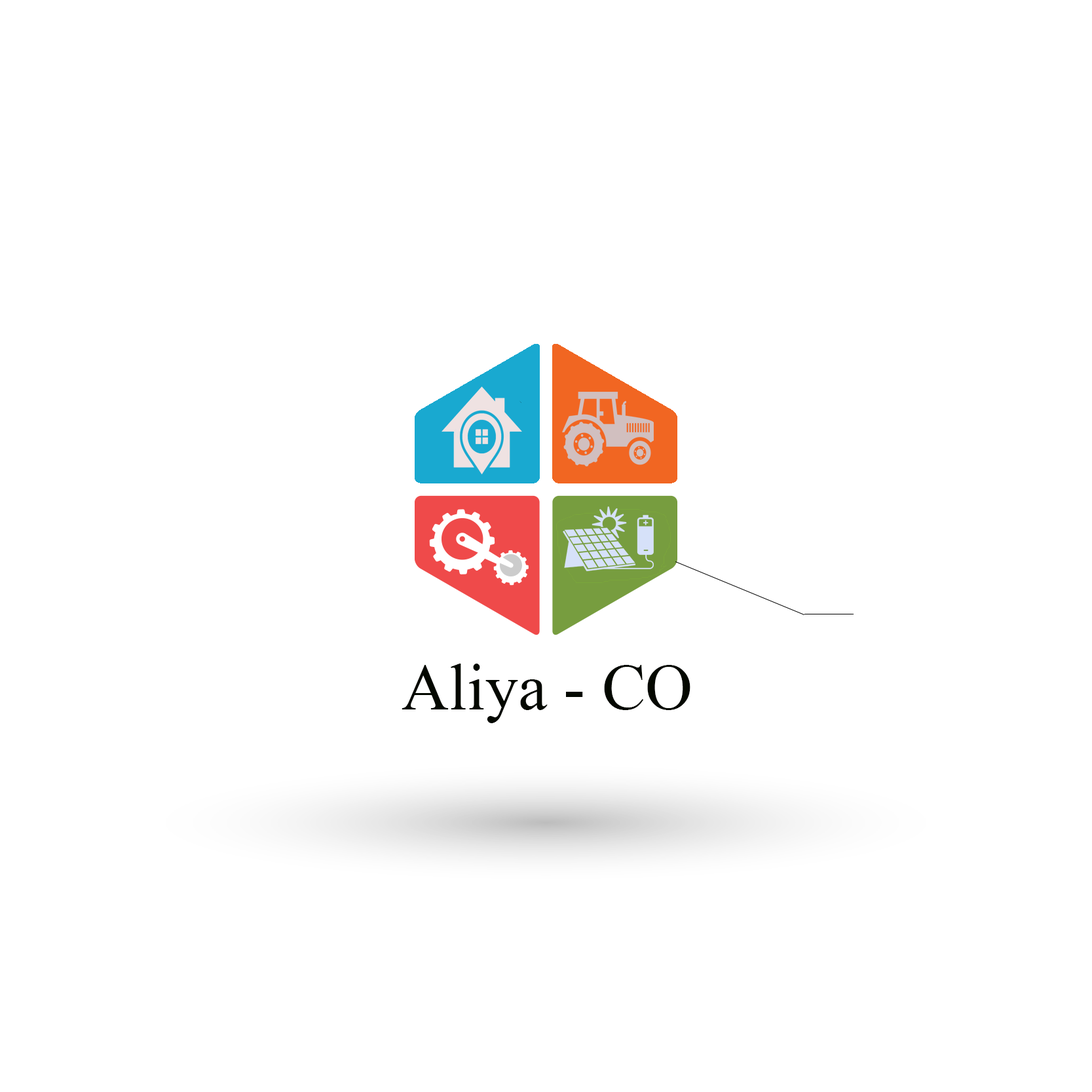
<style>
.page{position:relative;width:1092px;height:1092px;background:#ffffff}
.page>*{position:absolute;margin:0}
.t1{font:65.5px "Tahoma";color:#040800}
</style>
<div class="page">
<p class="t1" style="left:402px;top:664px;width:288px;height:59px">Aliya - CO</p>
</div>
